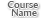
<style>
.page{position:relative;width:47px;height:18px;background:#ffffff}
.page>*{position:absolute;margin:0}
.t1{font:10px/8.9px "AmiraParadiso";color:#646464}
</style>
<div class="page">
<p class="t1" style="left:7px;top:1px;width:31px;height:15px;text-align:center">Course <br>Name</p>
</div>
